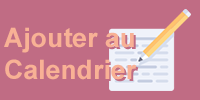
<style>
.page{position:relative;width:200px;height:100px;background:#c06c84}
.page>*{position:absolute;margin:0}
.t1{font:26.7px "Arial-BoldMT";color:#f8b195}
</style>
<div class="page">
<p class="t1" style="left:4px;top:27px;width:133px;height:53px">Ajouter au<br>Calendrier</p>
</div>
